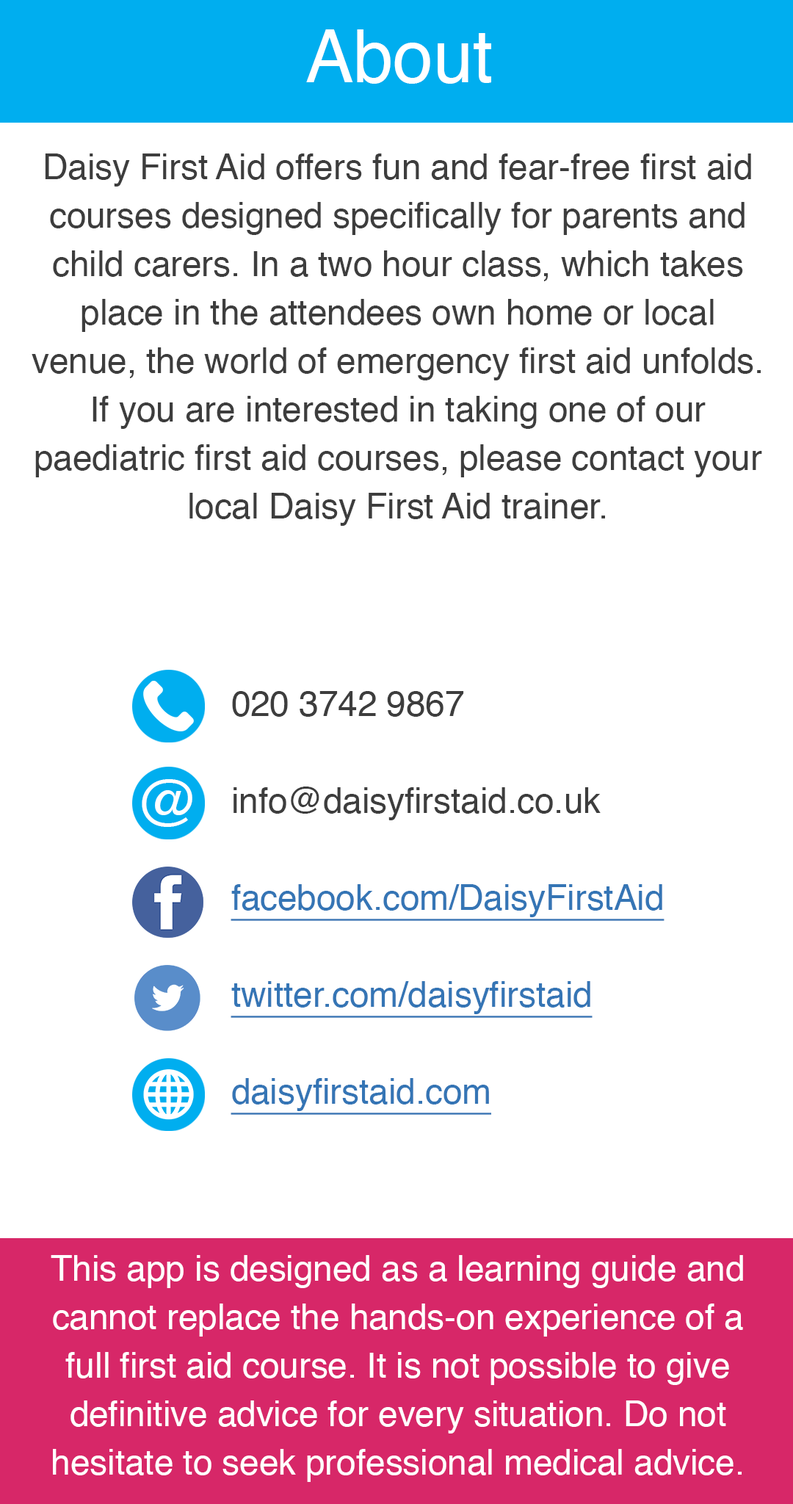
<style>
.page{position:relative;width:793px;height:1504px;background:#ffffff}
.page>*{position:absolute;margin:0}
.t1{font:72.9px "Helvetica";color:#ffffff}
.t2{font:35.5px/48.5px "Helvetica";color:#3d3d3d}
.t3{font:35.5px/48.5px "Helvetica";color:#3575b5;text-decoration:underline}
.t4{font:64.2px "Helvetica";color:#ffffff}
.t5{font:35.5px/48.5px "Helvetica";color:#ffffff}
</style>
<div class="page">
<p class="t1" style="left:306px;top:29px;width:185px;height:55px">About</p>
<p class="t2" style="left:32px;top:153px;width:730px;height:373px;text-align:center">Daisy First Aid offers fun and fear-free first aid courses designed specifically for parents and child carers. In a two hour class, which takes place in the attendees own home or local venue, the world of emergency first aid unfolds. If you are interested in taking one of our paediatric first aid courses, please contact your local Daisy First Aid trainer.</p>
<p class="t3" style="left:231px;top:691px;width:433px;height:424px"><span class="t2">020 3742 9867<br><br>info@daisyfirstaid.co.uk<br><br></span>facebook.com/DaisyFirstAid<br><br>twitter.com/daisyfirstaid<br><br>daisyfirstaid.com</p>
<p class="t4" style="left:142px;top:779px;width:50px;height:48px">@</p>
<p class="t5" style="left:51px;top:1255px;width:692px;height:227px;text-align:center">This app is designed as a learning guide and cannot replace the hands-on experience of a full first aid course. It is not possible to give definitive advice for every situation. Do not hesitate to seek professional medical advice.</p>
</div>
